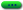
<style>
.page{position:relative;width:23px;height:10px}
.page>*{position:absolute;margin:0}
.t1{font:11px "Arial-BoldMT";color:#003366}
</style>
<div class="page">
<p class="t1" style="left:8px;top:4px;width:9px;height:2px">...</p>
</div>
